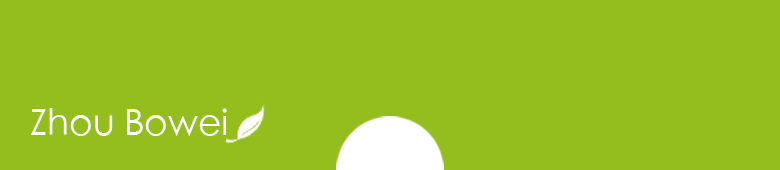
<style>
.page{position:relative;width:780px;height:170px;background:#93be1d}
.page>*{position:absolute;margin:0}
.t1{font:36px "STXihei";color:#ffffff}
</style>
<div class="page">
<p class="t1" style="left:31px;top:108px;width:196px;height:28px">Zhou Bowei</p>
</div>
